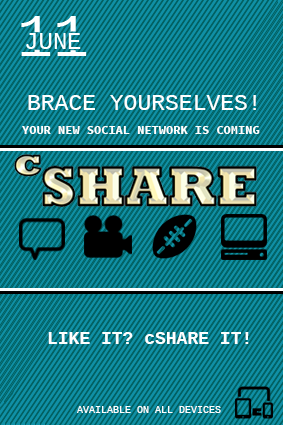
<style>
.page{position:relative;width:283px;height:425px;background:#1090a6}
.page>*{position:absolute;margin:0}
.t1{font:23px "LiberationMono";color:#fdffff}
.t2{font:12px "SourceCodePro-Bold";color:#fdffff}
.t3{font:18px "LiberationMono-Bold";color:#fdffff}
.t4{font:10px "LiberationMono";color:#fdffff}
</style>
<div class="page">
<p class="t1" style="left:28px;top:95px;width:228px;height:15px">BRACE YOURSELVES!</p>
<p class="t2" style="left:22px;top:126px;width:238px;height:8px">YOUR NEW SOCIAL NETWORK IS COMING</p>
<p class="t3" style="left:48px;top:332px;width:201px;height:12px">LIKE IT? cSHARE IT!</p>
<p class="t4" style="left:77px;top:406px;width:144px;height:7px">AVAILABLE ON ALL DEVICES</p>
</div>
